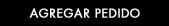
<style>
.page{position:relative;width:169px;height:26px;background:#000000}
.page>*{position:absolute;margin:0}
.t1{font:12px "FuturaLT-Book";letter-spacing:0.03em;color:#ffffff;font-weight:bold}
</style>
<div class="page">
<p class="t1" style="left:29px;top:8px;width:111px;height:10px">AGREGAR PEDIDO</p>
</div>
